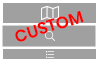
<style>
.page{position:relative;width:100px;height:61px;background:#a0a0a0}
.page>*{position:absolute;margin:0}
.t1{font:16.6px "Poppins-SemiBold";color:#ff0000;text-transform:uppercase}
</style>
<div class="page">
<p class="t1" style="left:15px;top:10px;width:69px;height:32px;rotate:-18deg">Custom</p>
</div>
